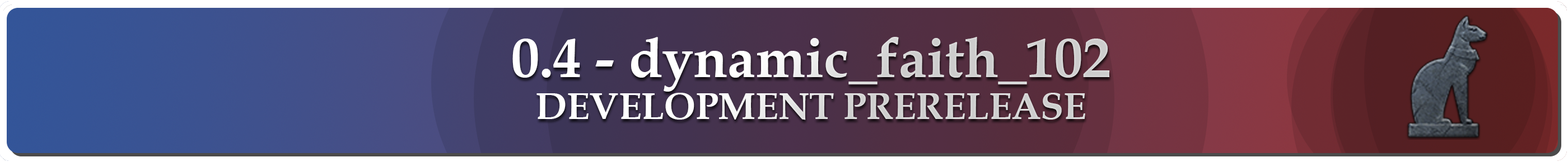
<style>
.page{position:relative;width:1568px;height:162px}
.page>*{position:absolute;margin:0}
.t1{font:56px "BookAntiqua-Bold"}
.t2{font:37.3px/42px "BookAntiqua-Bold"}
</style>
<div class="page">
<p class="t1" style="left:512px;top:37px;width:598px;height:83px;text-align:center">0.4 - dynamic_faith_102<br><span class="t2">DEVELOPMENT PRERELEASE</span></p>
</div>
